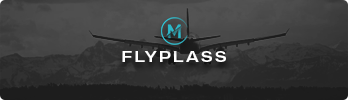
<style>
.page{position:relative;width:348px;height:100px}
.page>*{position:absolute;margin:0}
.t1{font:15px "MADEOuterSans";letter-spacing:0.14em;color:#ffffff}
</style>
<div class="page">
<p class="t1" style="left:122px;top:51px;width:104px;height:11px">FLYPLASS</p>
</div>
